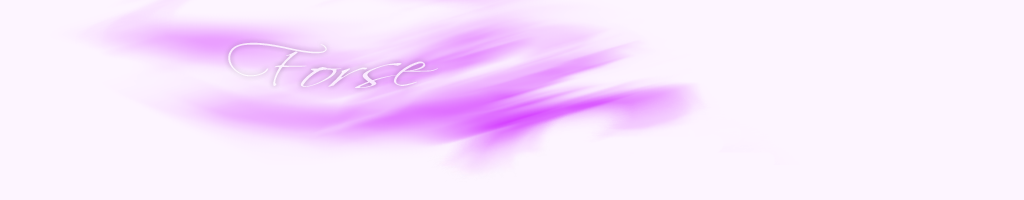
<style>
.page{position:relative;width:1024px;height:200px;background:#fdf5ff}
.page>*{position:absolute;margin:0}
.t1{font:56px "Scriptina";color:#ffffff;scale:1.71 1}
</style>
<div class="page">
<p class="t1" style="left:228px;top:42px;width:210px;height:47px;opacity:0.72">Forse</p>
</div>
